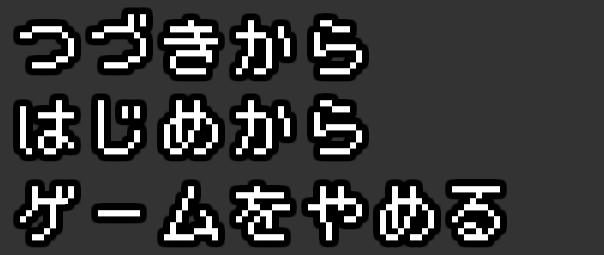
<style>
.page{position:relative;width:604px;height:255px;background:#333333}
.page>*{position:absolute;margin:0}
.t1{font:60px "BestTenDOT";letter-spacing:0.2em;color:#ffffff}
</style>
<div class="page">
<p class="t1" style="left:20px;top:14px;width:342px;height:61px">つづきから</p>
<p class="t1" style="left:20px;top:100px;width:342px;height:55px">はじめから</p>
<p class="t1" style="left:20px;top:186px;width:480px;height:55px">ゲームをやめる</p>
</div>
